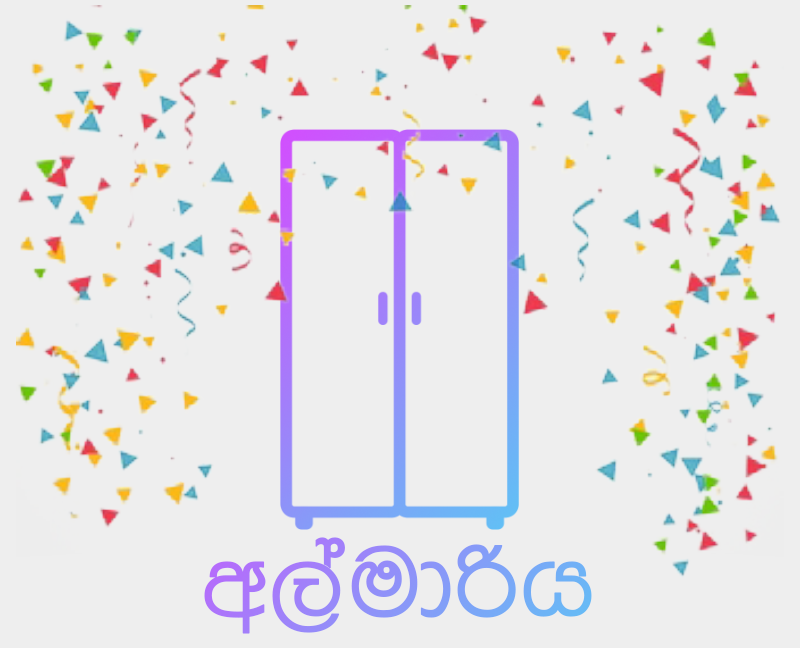
<style>
.page{position:relative;width:800px;height:648px;background:#eeeeee}
.page>*{position:absolute;margin:0}
.t1{font:106.4px "4u-Milith-";font-weight:bold}
</style>
<div class="page">
<p class="t1" style="left:204px;top:537px;width:388px;height:97px">w,audßh</p>
</div>
